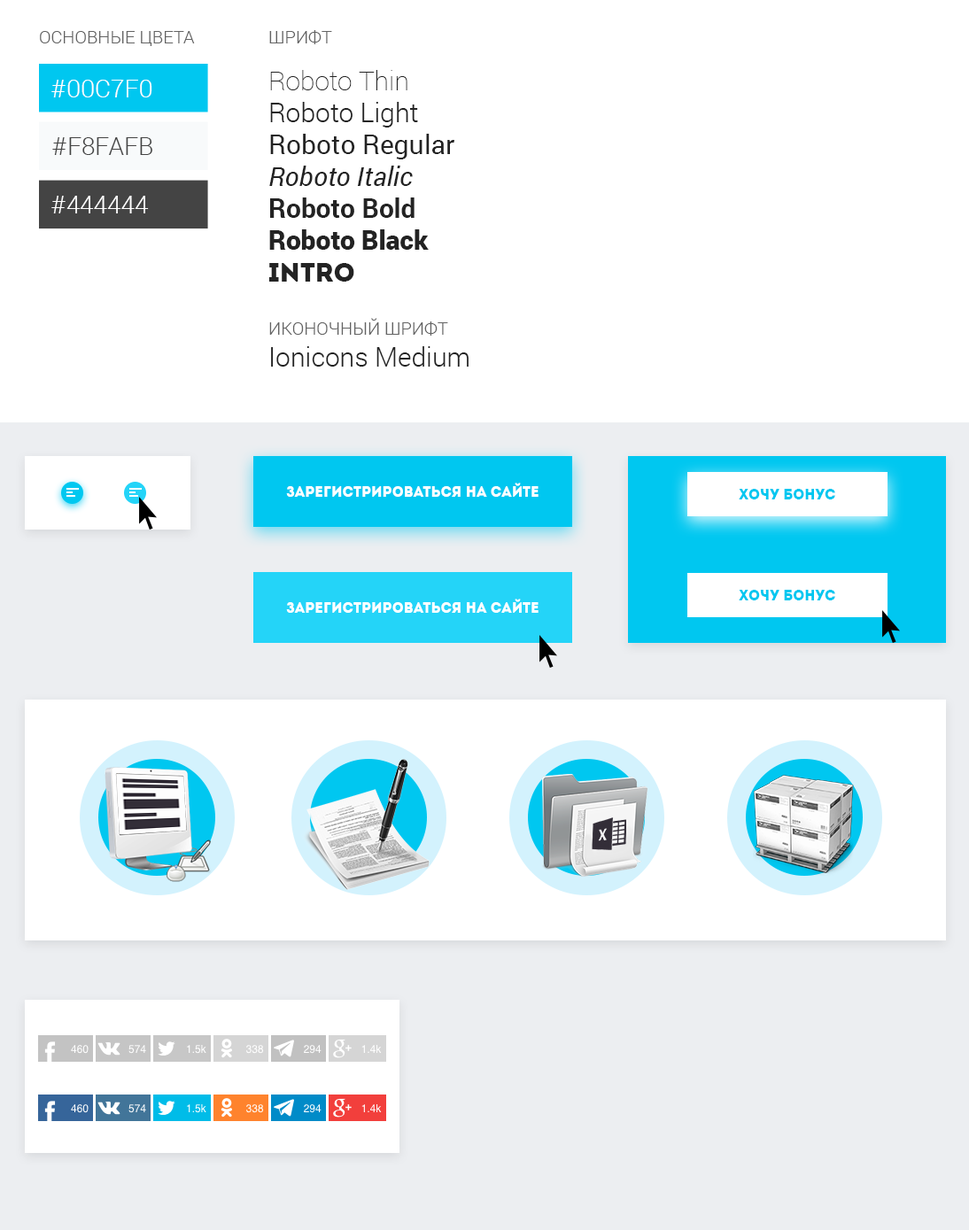
<style>
.page{position:relative;width:969px;height:1230px;background:#ffffff}
.page>*{position:absolute;margin:0}
.t1{font:17.7px "Roboto-Light";color:#636363;text-transform:uppercase}
.t2{font:26.6px "Roboto-Thin";color:#232323}
.t3{font:26.6px "Roboto-Light";color:#232323}
.t4{font:26.6px "Roboto-Regular";color:#232323}
.t5{font:26.6px "Roboto-Italic";color:#232323}
.t6{font:26.6px "Roboto-Bold";color:#232323}
.t7{font:26.6px "Roboto-Black";color:#232323}
.t8{font:26.6px "Intro";color:#232323}
.t9{font:24.7px "Roboto-Light";color:#ffffff;text-transform:uppercase}
.t10{font:24.7px "Roboto-Light";color:#444444;text-transform:uppercase}
.t11{font:14.2px "Intro";color:#ffffff}
.t12{font:14.2px "Intro";color:#00c7f0}
</style>
<div class="page">
<p class="t1" style="left:40px;top:31px;width:155px;height:15px">Основные цвета</p>
<p class="t1" style="left:269px;top:30px;width:63px;height:14px">шрифт</p>
<p class="t1" style="left:268px;top:70px;width:201px;height:297px"><span class="t2">Roboto Thin<br></span><span class="t3">Roboto Light<br></span><span class="t4">Roboto Regular<br></span><span class="t5">Roboto Italic<br></span><span class="t6">Roboto Bold<br></span><span class="t7">Roboto Black<br></span><span class="t8">Intro <br><br></span>Иконочный шрифт<br><span class="t3">Ionicons Medium</span></p>
<p class="t9" style="left:51px;top:80px;width:101px;height:17px">#00c7f0</p>
<p class="t10" style="left:52px;top:137px;width:100px;height:18px">#f8fafb</p>
<p class="t9" style="left:51px;top:196px;width:98px;height:17px">#444444</p>
<p class="t11" style="left:286px;top:483px;width:253px;height:14px">Зарегистрироваться на сайте</p>
<p class="t12" style="left:739px;top:489px;width:96px;height:11px">хочу бонус</p>
<p class="t12" style="left:739px;top:590px;width:96px;height:11px">хочу бонус</p>
<p class="t11" style="left:286px;top:599px;width:253px;height:14px">Зарегистрироваться на сайте</p>
</div>
